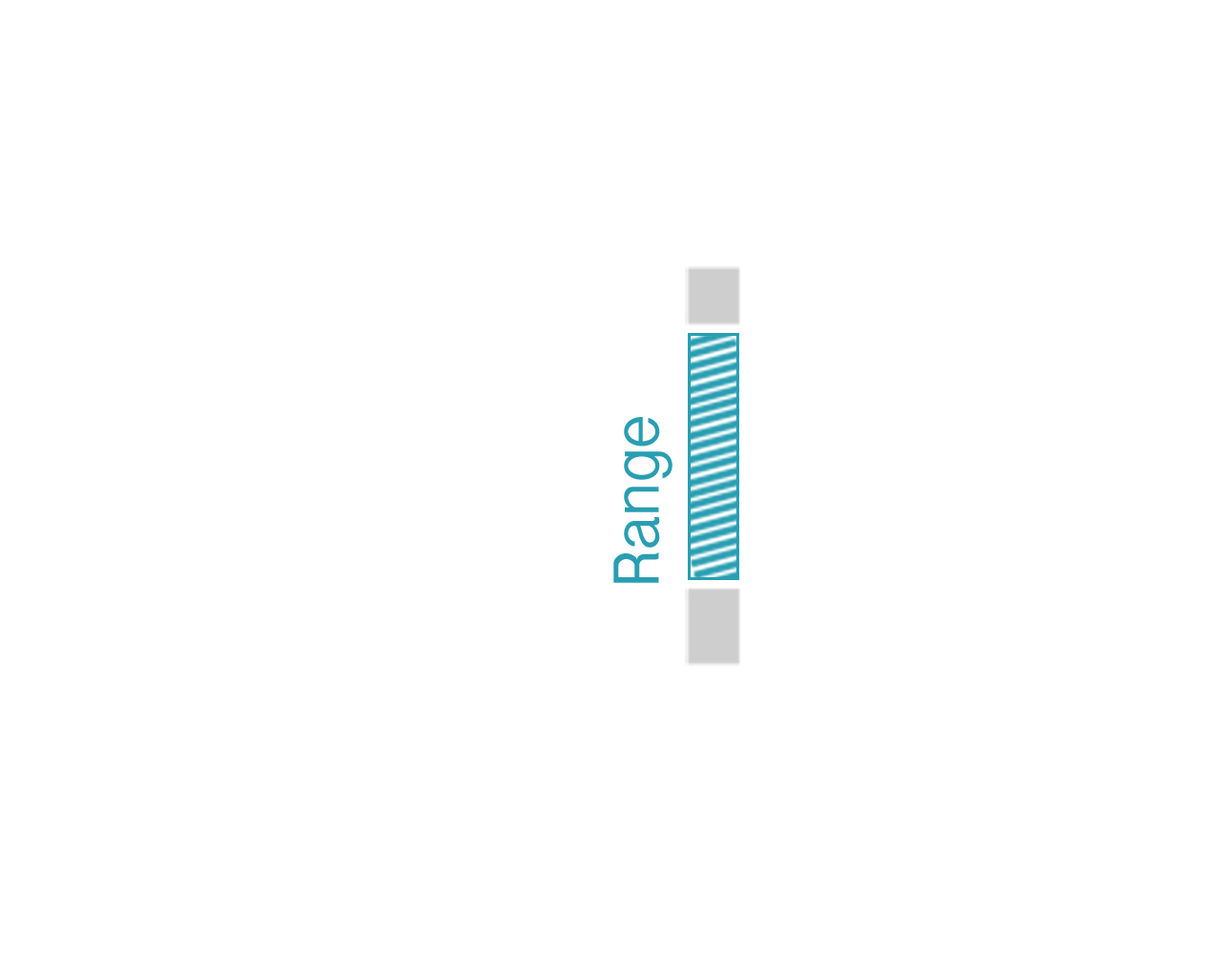
<style>
.page{position:relative;width:1221px;height:977px;background:#ffffff}
.page>*{position:absolute;margin:0}
.t1{font:68.1px "InaiMathi";color:#299eb2}
</style>
<div class="page">
<p class="t1" style="left:613px;top:417px;width:59px;height:166px;rotate:-90deg">Range</p>
</div>
